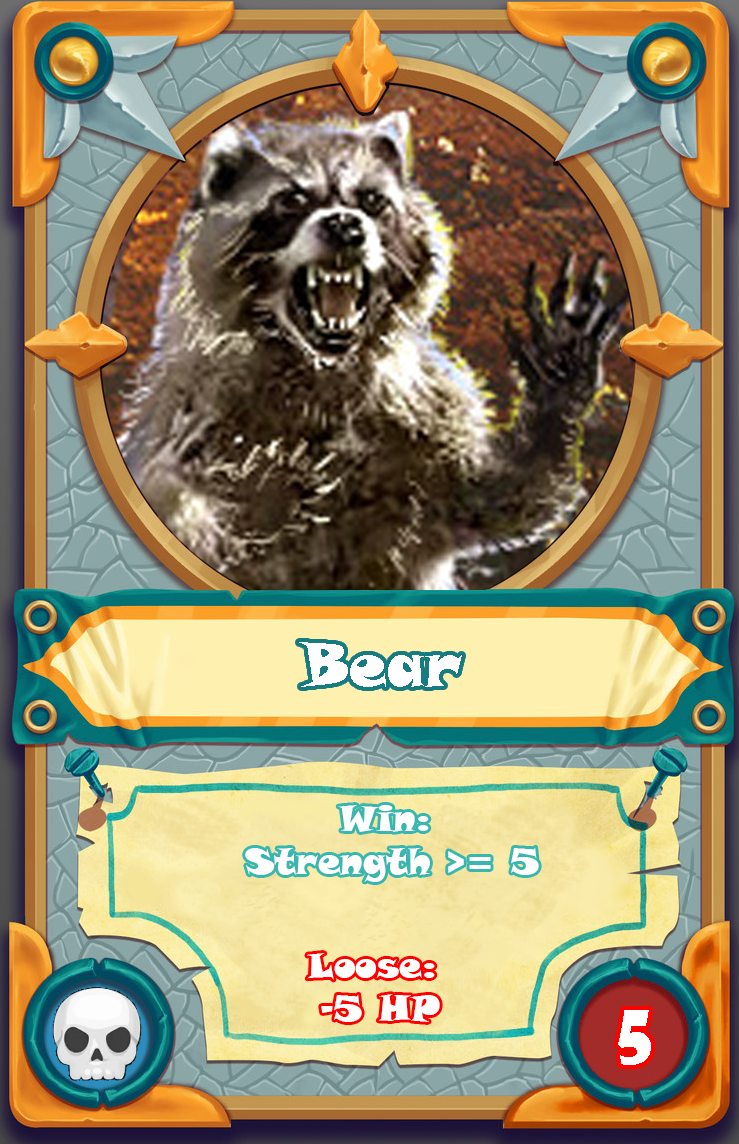
<style>
.page{position:relative;width:739px;height:1144px}
.page>*{position:absolute;margin:0}
.t1{font:60px "SnapITC-Regular";color:#ffffff}
.t2{font:36px "SnapITC-Regular";color:#ffffff}
.t3{font:72px "ShowcardGothic-Reg";color:#ffffff}
</style>
<div class="page">
<p class="t1" style="left:299px;top:642px;width:163px;height:45px">Bear</p>
<p class="t2" style="left:245px;top:805px;width:294px;height:77px;text-align:center">Win: <br>Strength &gt;= 5</p>
<p class="t2" style="left:307px;top:953px;width:133px;height:69px;text-align:center">Loose: <br>-5 HP</p>
<p class="t3" style="left:618px;top:1010px;width:33px;height:55px">5</p>
</div>
